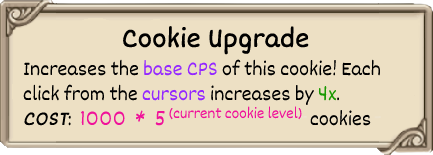
<style>
.page{position:relative;width:433px;height:155px;background:#ede0c4}
.page>*{position:absolute;margin:0}
.t1{font:29px "Dekko";color:#000000;font-weight:bold}
.t2{font:21px "Dekko";color:#000000}
.t3{font:21px "Dekko";color:#9428ff}
.t4{font:21px "Dekko";color:#1b9902}
.t5{font:21px "Dekko";color:#000000;font-weight:bold;font-style:italic}
.t6{font:21px "Dekko";color:#f0129a}
.t7{font:16px "Dekko";color:#f0129a}
</style>
<div class="page">
<p class="t1" style="left:123px;top:26px;width:186px;height:29px">Cookie Upgrade</p>
<p class="t2" style="left:23px;top:59px;width:357px;height:67px">Increases the <span class="t3">base CPS </span>of this cookie! Each <br>click from the <span class="t3">cursors </span>increases by <span class="t4">4x</span>.<br><span class="t5">COST</span>:  <span class="t6">1000  *  5                                  </span>cookies</p>
<p class="t7" style="left:169px;top:106px;width:133px;height:14px">(current cookie level)</p>
</div>
